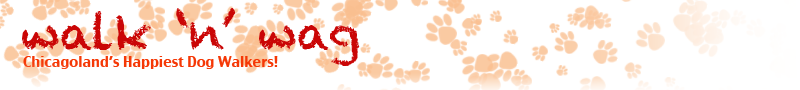
<style>
.page{position:relative;width:800px;height:90px;background:#ffffff}
.page>*{position:absolute;margin:0}
.t1{font:48px "Chalkduster";color:#ca0606}
.t2{font:14px "CharcoalCY";color:#f53806}
</style>
<div class="page">
<p class="t1" style="left:21px;top:8px;width:339px;height:58px">walk ‘n’ wag</p>
<p class="t2" style="left:23px;top:56px;width:255px;height:13px">Chicagoland’s Happiest Dog Walkers!</p>
</div>
